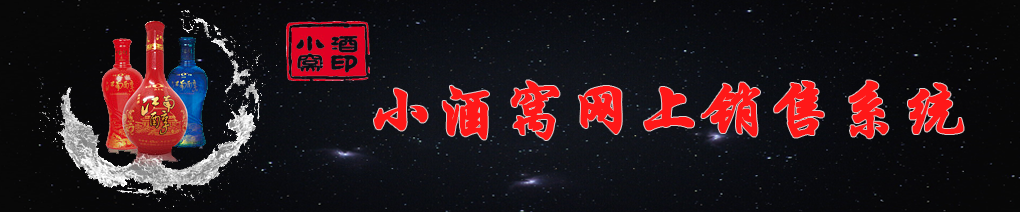
<style>
.page{position:relative;width:1020px;height:212px}
.page>*{position:absolute;margin:0}
.t1{font:64.3px "STXingkai";color:#ff1818;font-weight:bold}
</style>
<div class="page">
<p class="t1" style="left:374px;top:80px;width:590px;height:60px">小酒窝网上销售系统</p>
</div>
